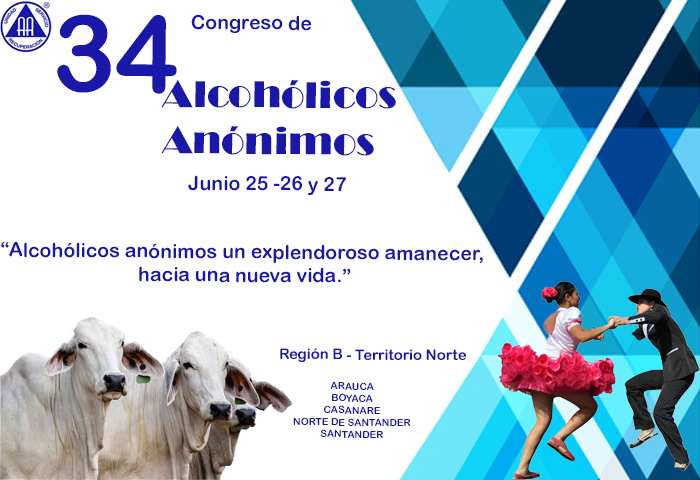
<style>
.page{position:relative;width:700px;height:480px;background:#ffffff}
.page>*{position:absolute;margin:0}
.t1{font:106.4px "ArialRoundedMTBold";color:#1a18a9}
.t2{font:19.5px "ArialRoundedMTBold";color:#1a18a9}
.t3{font:38.8px "Broadway";color:#1a18a9}
.t4{font:14.7px "ArialRoundedMTBold";color:#1a18a9}
.t5{font:10px "ArialRoundedMTBold";color:#1a18a9}
</style>
<div class="page">
<p class="t1" style="left:57px;top:14px;width:120px;height:80px">34</p>
<p class="t2" style="left:191px;top:14px;width:120px;height:19px">Congreso de</p>
<p class="t3" style="left:161px;top:79px;width:235px;height:77px">Alcohólicos <br>Anónimos</p>
<p class="t2" style="left:188px;top:175px;width:158px;height:20px">Junio 25 -26 y 27</p>
<p class="t2" style="left:1px;top:241px;width:482px;height:42px;text-align:center">“Alcohólicos anónimos un explendoroso amanecer,<br> hacia una nueva vida.”</p>
<p class="t4" style="left:280px;top:348px;width:186px;height:14px">Región B - Territorio Norte</p>
<p class="t5" style="left:293px;top:381px;width:118px;height:57px;text-align:center">ARAUCA<br>BOYACA<br>CASANARE<br>NORTE DE SANTANDER<br>SANTANDER</p>
</div>
